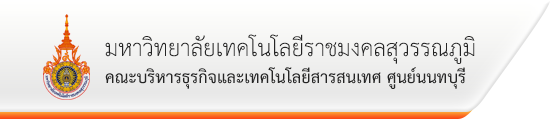
<style>
.page{position:relative;width:550px;height:119px}
.page>*{position:absolute;margin:0}
.t1{font:33px "THSarabunPSK";color:#252525}
.t2{font:24px "THSarabunPSK-Bold";color:#252525}
</style>
<div class="page">
<p class="t1" style="left:105px;top:34px;width:370px;height:30px">มหาวิทยาลัยเทคโนโลยีราชมงคลสุวรรณภูมิ</p>
<p class="t2" style="left:105px;top:67px;width:361px;height:22px">คณะบริหารธุรกิจและเทคโนโลยีสารสนเทศ ศูนย์นนทบุรี</p>
</div>
